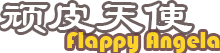
<style>
.page{position:relative;width:220px;height:53px;background:#ffffff}
.page>*{position:absolute;margin:0}
.t1{font:48px "STBaoli-SC-Regular";color:#ffffff}
.t2{font:24px "Bauhaus93";color:#fdd429}
</style>
<div class="page">
<p class="t1" style="left:0px;top:3px;width:192px;height:30px">顽皮天使</p>
<p class="t2" style="left:67px;top:32px;width:153px;height:21px">Flappy Angela</p>
</div>
